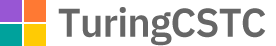
<style>
.page{position:relative;width:276px;height:46px;background:#ffffff}
.page>*{position:absolute;margin:0}
.t1{font:40px "IBMPlexSans-SemiBold";letter-spacing:-0.025em;color:#666666}
</style>
<div class="page">
<p class="t1" style="left:58px;top:7px;width:208px;height:39px">TuringCSTC</p>
</div>
